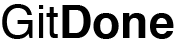
<style>
.page{position:relative;width:176px;height:48px;background:#ffffff}
.page>*{position:absolute;margin:0}
.t1{font:46.1px "Helvetica-Bold";color:#000000}
.t2{font:46.1px "Helvetica";color:#000000}
</style>
<div class="page">
<p class="t1" style="left:2px;top:4px;width:172px;height:35px"><span class="t2">Git</span>Done</p>
</div>
